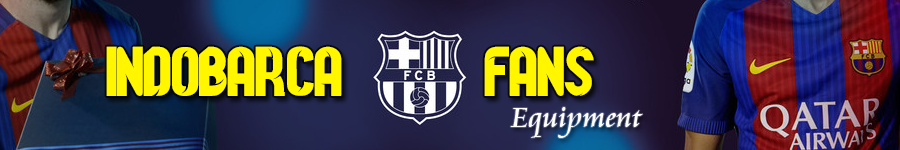
<style>
.page{position:relative;width:900px;height:150px}
.page>*{position:absolute;margin:0}
.t1{font:83.2px "Barcelona-2013-Regular";color:#fff600}
.t2{font:30.6px "CataneoBT-Regular";color:#ffffff}
</style>
<div class="page">
<p class="t1" style="left:106px;top:46px;width:236px;height:50px">INDOBARCA</p>
<p class="t1" style="left:484px;top:46px;width:110px;height:50px">FANS</p>
<p class="t2" style="left:510px;top:107px;width:133px;height:31px">Equipment</p>
</div>
